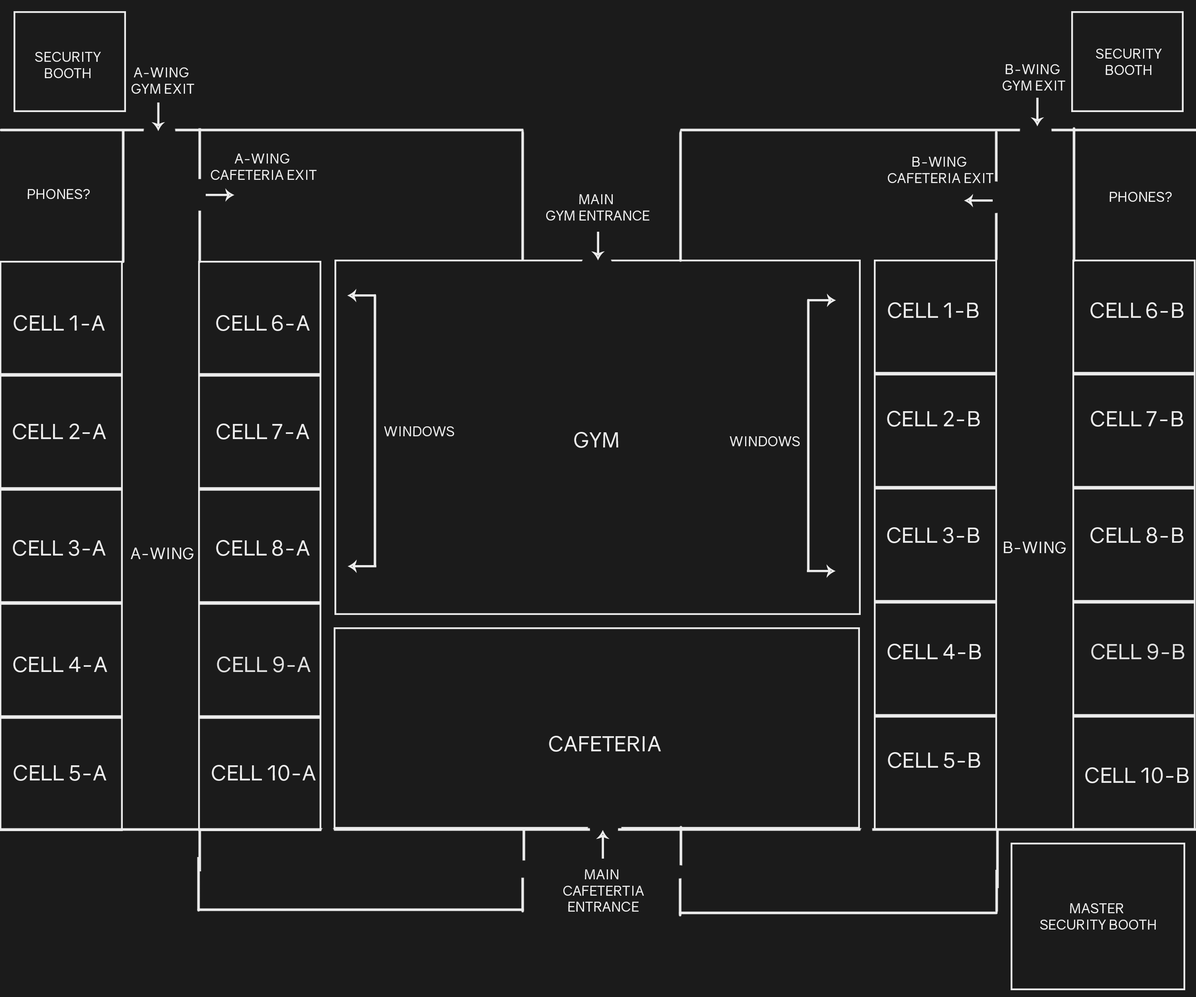
<style>
.page{position:relative;width:1196px;height:997px;background:#1b1b1b}
.page>*{position:absolute;margin:0}
.t1{font:13.6px "Gravity-Regular";color:#ececec}
.t2{font:20.7px "Gravity-Regular";color:#ececec}
.t3{font:15.6px "Gravity-Regular";color:#ececec}
</style>
<div class="page">
<p class="t1" style="left:35px;top:52px;width:66px;height:26px;text-align:center">SECURITY<br>BOOTH</p>
<p class="t1" style="left:1096px;top:49px;width:66px;height:26px;text-align:center">SECURITY<br>BOOTH</p>
<p class="t1" style="left:1003px;top:64px;width:62px;height:27px;text-align:center">B-WING <br>GYM EXIT</p>
<p class="t1" style="left:132px;top:67px;width:62px;height:27px;text-align:center">A-WING <br>GYM EXIT</p>
<p class="t1" style="left:211px;top:154px;width:106px;height:26px;text-align:center">A-WING <br>CAFETERIA EXIT</p>
<p class="t1" style="left:888px;top:157px;width:106px;height:26px;text-align:center">B-WING <br>CAFETERIA EXIT</p>
<p class="t1" style="left:28px;top:189px;width:62px;height:10px">PHONES?</p>
<p class="t1" style="left:546px;top:194px;width:104px;height:27px;text-align:center">MAIN <br>GYM ENTRANCE</p>
<p class="t1" style="left:1110px;top:192px;width:62px;height:10px">PHONES?</p>
<p class="t2" style="left:888px;top:302px;width:91px;height:16px">CELL 1-B</p>
<p class="t2" style="left:1091px;top:302px;width:93px;height:16px">CELL 6-B</p>
<p class="t2" style="left:14px;top:315px;width:91px;height:16px">CELL 1-A</p>
<p class="t2" style="left:216px;top:315px;width:94px;height:16px">CELL 6-A</p>
<p class="t2" style="left:887px;top:411px;width:93px;height:16px">CELL 2-B</p>
<p class="t2" style="left:1091px;top:411px;width:92px;height:16px">CELL 7-B</p>
<p class="t2" style="left:13px;top:423px;width:93px;height:16px">CELL 2-A</p>
<p class="t2" style="left:217px;top:423px;width:92px;height:16px">CELL 7-A</p>
<p class="t1" style="left:384px;top:426px;width:70px;height:10px">WINDOWS</p>
<p class="t2" style="left:574px;top:432px;width:44px;height:16px">GYM</p>
<p class="t1" style="left:730px;top:436px;width:70px;height:10px">WINDOWS</p>
<p class="t2" style="left:887px;top:527px;width:93px;height:16px">CELL 3-B</p>
<p class="t2" style="left:1091px;top:527px;width:93px;height:16px">CELL 8-B</p>
<p class="t2" style="left:13px;top:540px;width:93px;height:16px">CELL 3-A</p>
<p class="t2" style="left:216px;top:540px;width:94px;height:16px">CELL 8-A</p>
<p class="t3" style="left:1004px;top:541px;width:62px;height:12px">B-WING</p>
<p class="t3" style="left:131px;top:547px;width:63px;height:12px">A-WING</p>
<p class="t2" style="left:888px;top:644px;width:93px;height:16px">CELL 4-B</p>
<p class="t2" style="left:1091px;top:644px;width:94px;height:16px;opacity:0.9">CELL 9-B</p>
<p class="t2" style="left:13px;top:656px;width:94px;height:16px">CELL 4-A</p>
<p class="t2" style="left:217px;top:656px;width:94px;height:16px;opacity:0.9">CELL 9-A</p>
<p class="t2" style="left:549px;top:736px;width:112px;height:16px">CAFETERIA</p>
<p class="t2" style="left:888px;top:752px;width:92px;height:16px">CELL 5-B</p>
<p class="t2" style="left:14px;top:765px;width:92px;height:16px">CELL 5-A</p>
<p class="t2" style="left:212px;top:765px;width:104px;height:16px">CELL 10-A</p>
<p class="t2" style="left:1085px;top:767px;width:104px;height:16px">CELL 10-B</p>
<p class="t1" style="left:563px;top:869px;width:81px;height:43px;text-align:center">MAIN <br>CAFETERTIA<br>ENTRANCE</p>
<p class="t1" style="left:1040px;top:903px;width:116px;height:26px;text-align:center">MASTER <br>SECURITY BOOTH</p>
</div>
